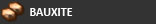
<style>
.page{position:relative;width:156px;height:24px;background:#333333}
.page>*{position:absolute;margin:0}
.t1{font:12px "Calibri-Bold";color:#ffffff}
</style>
<div class="page">
<p class="t1" style="left:30px;top:8px;width:43px;height:8px">BAUXITE</p>
</div>
